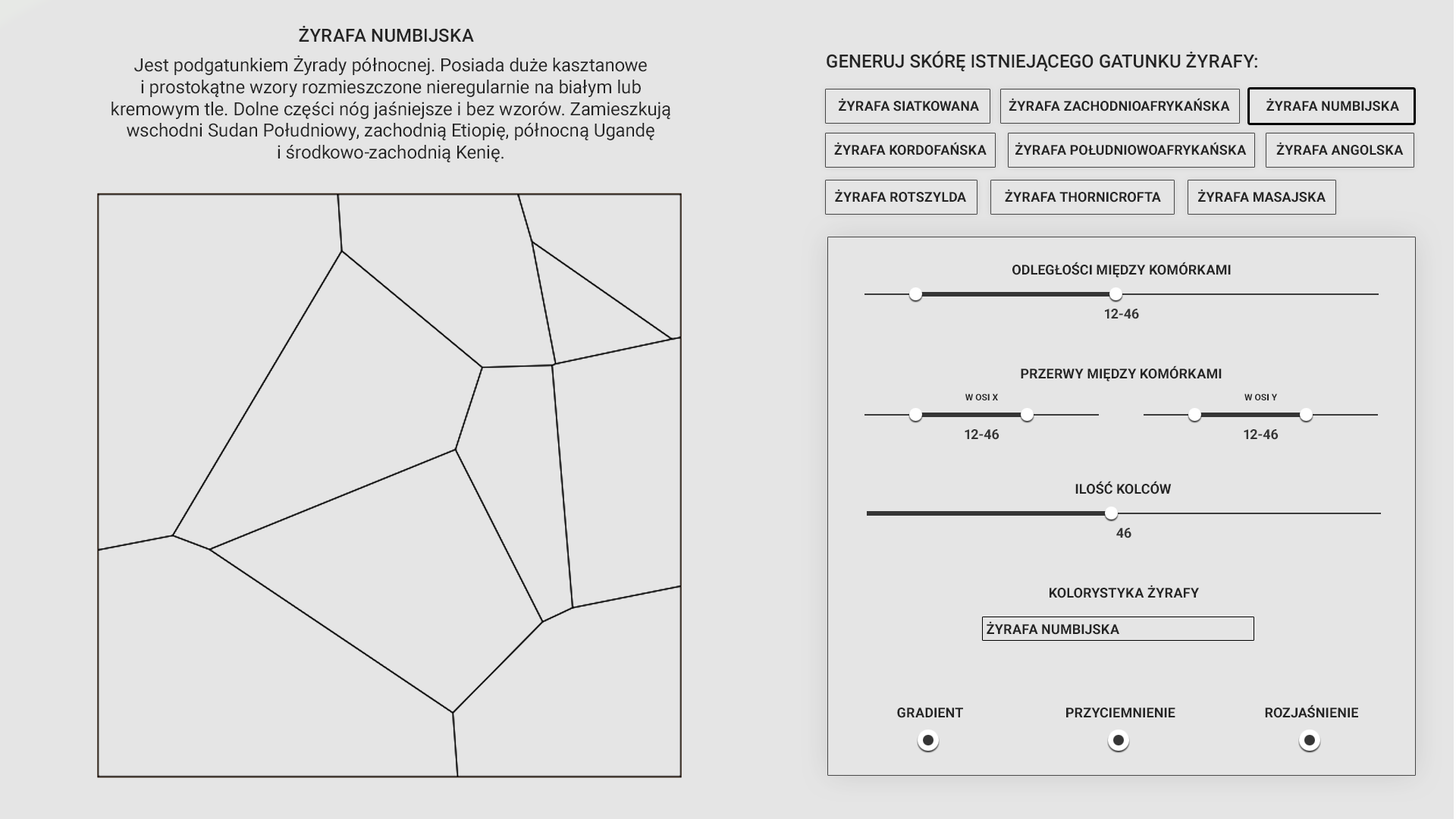
<style>
.page{position:relative;width:1456px;height:819px;background:#e5e5e5}
.page>*{position:absolute;margin:0}
.t1{font:18.2px "Roboto-Medium";color:#242424;text-transform:uppercase}
.t2{font:18.2px "Roboto-Regular";color:#242424}
.t3{font:13.6px "Roboto-Bold";color:#242424;text-transform:uppercase}
.t4{font:13.6px "Roboto-Bold";color:#353535;text-transform:uppercase}
.t5{font:9.1px "Roboto-Bold";color:#242424;text-transform:uppercase}
</style>
<div class="page">
<p class="t1" style="left:299px;top:26px;width:175px;height:16px">Żyrafa numbijska</p>
<p class="t1" style="left:827px;top:51px;width:430px;height:20px">Generuj skórę istniejącego gatunku żyrafy:</p>
<p class="t2" style="left:111px;top:55px;width:559px;height:107px;text-align:center">Jest podgatunkiem Żyrady północnej. Posiada duże kasztanowe <br>i prostokątne wzory rozmieszczone nieregularnie na białym lub kremowym tle. Dolne części nóg jaśniejsze i bez wzorów. Zamieszkują wschodni Sudan Południowy, zachodnią Etiopię, północną Ugandę <br>i środkowo-zachodnią Kenię.</p>
<p class="t3" style="left:839px;top:98px;width:140px;height:13px">Żyrafa siatkowana</p>
<p class="t3" style="left:1009px;top:98px;width:221px;height:13px">Żyrafa zachodnioafrykańska</p>
<p class="t3" style="left:1266px;top:98px;width:133px;height:13px">Żyrafa numbijska</p>
<p class="t3" style="left:834px;top:142px;width:153px;height:13px">Żyrafa kordofańska</p>
<p class="t3" style="left:1015px;top:142px;width:232px;height:13px">Żyrafa południowoafrykańska</p>
<p class="t3" style="left:1276px;top:142px;width:128px;height:13px">Żyrafa angolska</p>
<p class="t3" style="left:835px;top:189px;width:131px;height:13px">Żyrafa rotszylda</p>
<p class="t3" style="left:1005px;top:189px;width:156px;height:13px">Żyrafa thornicrofta</p>
<p class="t3" style="left:1198px;top:189px;width:128px;height:13px">Żyrafa masajska</p>
<p class="t3" style="left:1012px;top:262px;width:219px;height:16px">odległości między komórkami</p>
<p class="t4" style="left:1105px;top:309px;width:34px;height:10px">12-46</p>
<p class="t3" style="left:1021px;top:366px;width:201px;height:15px">przerwy między komórkami</p>
<p class="t5" style="left:965px;top:394px;width:33px;height:6px">W Osi X</p>
<p class="t5" style="left:1244px;top:394px;width:34px;height:6px">W osi Y</p>
<p class="t4" style="left:965px;top:429px;width:34px;height:11px">12-46</p>
<p class="t4" style="left:1244px;top:429px;width:35px;height:11px">12-46</p>
<p class="t3" style="left:1075px;top:481px;width:97px;height:13px">Ilość kolców</p>
<p class="t4" style="left:1116px;top:528px;width:15px;height:10px">46</p>
<p class="t3" style="left:1050px;top:585px;width:149px;height:13px">Kolorystyka żyrafy</p>
<p class="t3" style="left:987px;top:621px;width:132px;height:14px">Żyrafa numbijska</p>
<p class="t3" style="left:897px;top:708px;width:66px;height:10px">gradient</p>
<p class="t3" style="left:1066px;top:708px;width:109px;height:10px">Przyciemnienie</p>
<p class="t3" style="left:1265px;top:704px;width:93px;height:14px">Rozjaśnienie</p>
</div>
